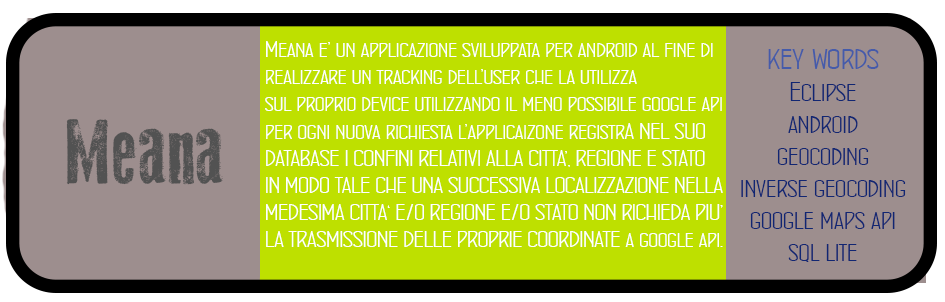
<style>
.page{position:relative;width:945px;height:302px;background:#9d8e8e}
.page>*{position:absolute;margin:0}
.t1{font:22.7px "ConcursoItalianBTNWide";color:#ffffff}
.t2{font:26.7px "ConcursoItalianBTNWide";color:#112672}
.t3{font:32px "ConcursoItalianBTNWide";color:#455baa}
.t4{font:93.3px "OldPress";color:#525252}
</style>
<div class="page">
<p class="t1" style="left:265px;top:41px;width:458px;height:206px">Meana e’ un applicazione sviluppata per android al fine di<br>realizzare un tracking dell’user che la utilizza <br>sul proprio device utilizzando il meno possibile google api<br>per ogni nuova richiesta l’applicaizone registrA NEL SUO <br>DATABASE I CONFINI RELATIVI ALLA CITTA’, REGIONE E STATO <br>IN MODO TALE CHE UNA SUCCESSIVA LOCALIZZAZIONE NELLA<br>MEDESIMA CITTA‘ E/O REGIONE E/O STATO NON RICHIEDA PIU’<br>LA TRASMISSIONE DELLE PROPRIE COORDINATE a google api.</p>
<p class="t2" style="left:741px;top:49px;width:165px;height:213px;text-align:center"><span class="t3">key words<br></span>Eclipse<br>android<br>geocoding<br>inverse geocoding<br>google maps api<br>sql lite</p>
<p class="t4" style="left:66px;top:119px;width:157px;height:66px">Meana</p>
</div>
